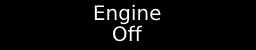
<style>
.page{position:relative;width:256px;height:50px;background:#000000}
.page>*{position:absolute;margin:0}
.t1{font:20px "DejaVuSans";color:#ffffff}
</style>
<div class="page">
<p class="t1" style="left:94px;top:4px;width:67px;height:21px">Engine</p>
<p class="t1" style="left:113px;top:25px;width:30px;height:17px">Off</p>
</div>
